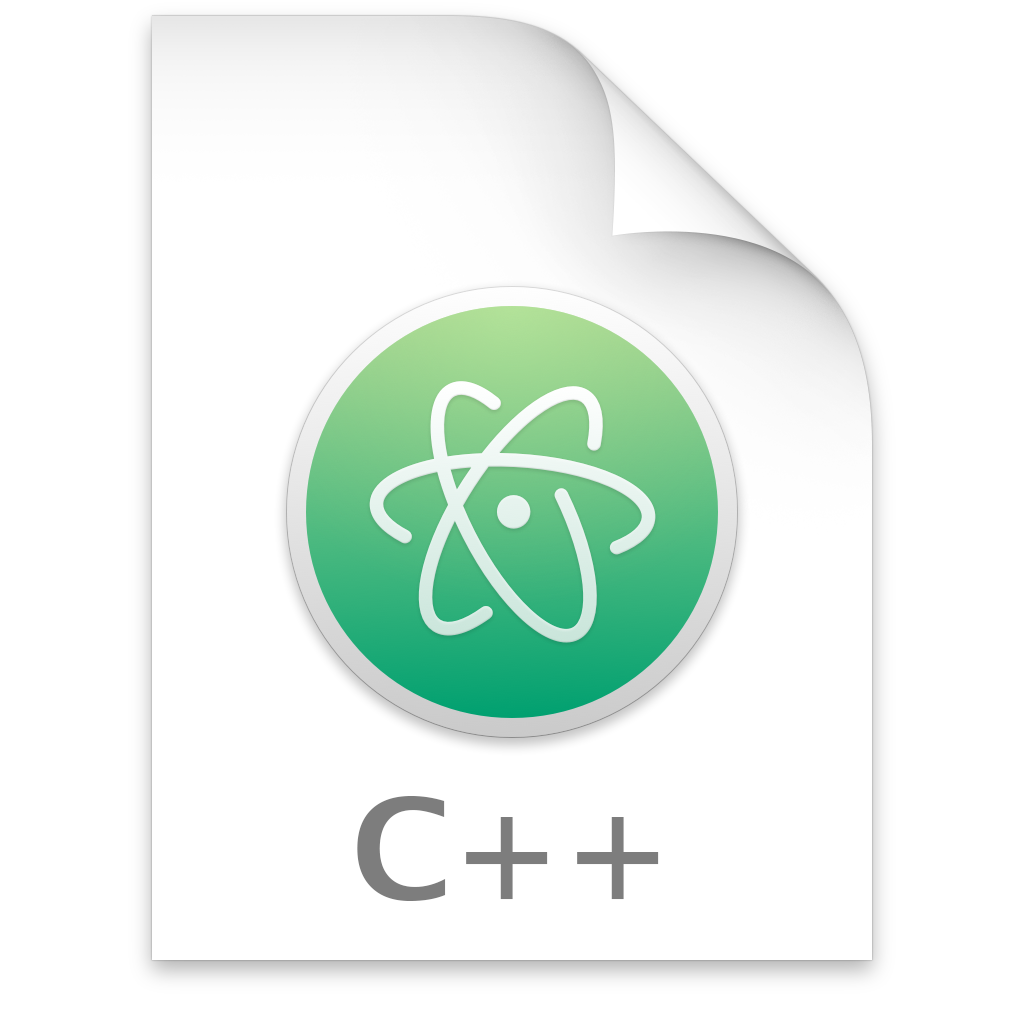
<style>
.page{position:relative;width:1024px;height:1024px;background:#ffffff}
.page>*{position:absolute;margin:0}
.t1{font:140px "LucidaGrande-Bold";color:#7d7d7d}
</style>
<div class="page">
<p class="t1" style="left:357px;top:796px;width:302px;height:105px">C++</p>
</div>
